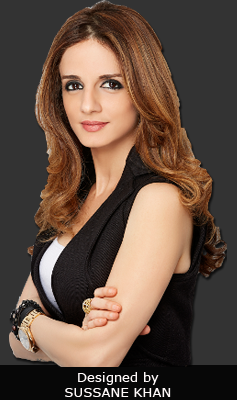
<style>
.page{position:relative;width:237px;height:400px;background:#333333}
.page>*{position:absolute;margin:0}
.t1{font:13px "Verdana";color:#fffafa}
</style>
<div class="page">
<p class="t1" style="left:65px;top:372px;width:106px;height:25px;text-align:center">Designed by<br>SUSSANE KHAN</p>
</div>
